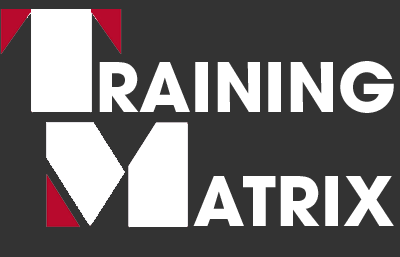
<style>
.page{position:relative;width:400px;height:257px;background:#333333}
.page>*{position:absolute;margin:0}
.t1{font:68px "ITCAvantGardePro-Bold";color:#ffffff}
</style>
<div class="page">
<p class="t1" style="left:99px;top:61px;width:295px;height:52px">RAINING</p>
<p class="t1" style="left:193px;top:176px;width:201px;height:50px">ATRIX</p>
</div>
